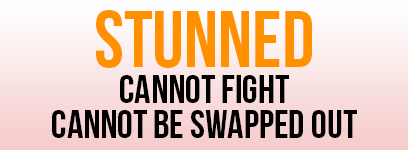
<style>
.page{position:relative;width:408px;height:150px}
.page>*{position:absolute;margin:0}
.t1{font:80px "BebasNeue";color:#ff9000}
.t2{font:40px "BebasNeue";color:#000000}
</style>
<div class="page">
<p class="t1" style="left:96px;top:10px;width:216px;height:58px">stunned</p>
<p class="t2" style="left:120px;top:75px;width:169px;height:28px">cannot fight</p>
<p class="t2" style="left:52px;top:110px;width:305px;height:28px">cannot be swapped out</p>
</div>
